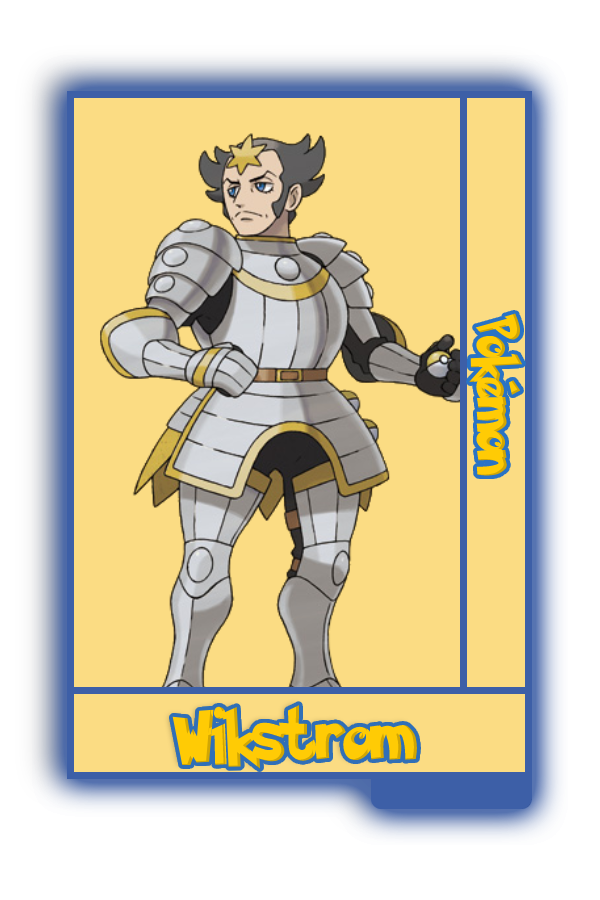
<style>
.page{position:relative;width:600px;height:900px;background:#fbdc83}
.page>*{position:absolute;margin:0}
.t1{font:48.8px "PokemonSolidNormal";color:#ffcb05;scale:0.8 1}
.t2{font:56.6px "PokemonSolidNormal";color:#ffcb05;scale:0.92 1}
</style>
<div class="page">
<p class="t1" style="left:469px;top:313px;width:54px;height:163px;rotate:90deg">Pokémon</p>
<p class="t2" style="left:172px;top:705px;width:245px;height:64px">Wikstrom</p>
</div>
